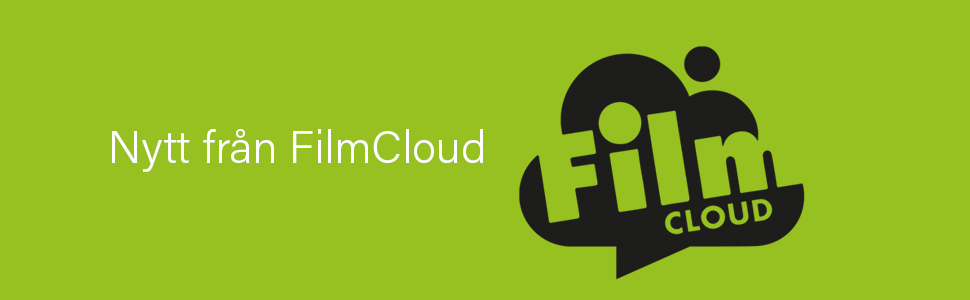
<style>
.page{position:relative;width:970px;height:300px;background:#97c121}
.page>*{position:absolute;margin:0}
.t1{font:45px "AcuminPro-Light";color:#ffffff}
</style>
<div class="page">
<p class="t1" style="left:112px;top:129px;width:371px;height:43px">Nytt från FilmCloud</p>
</div>
